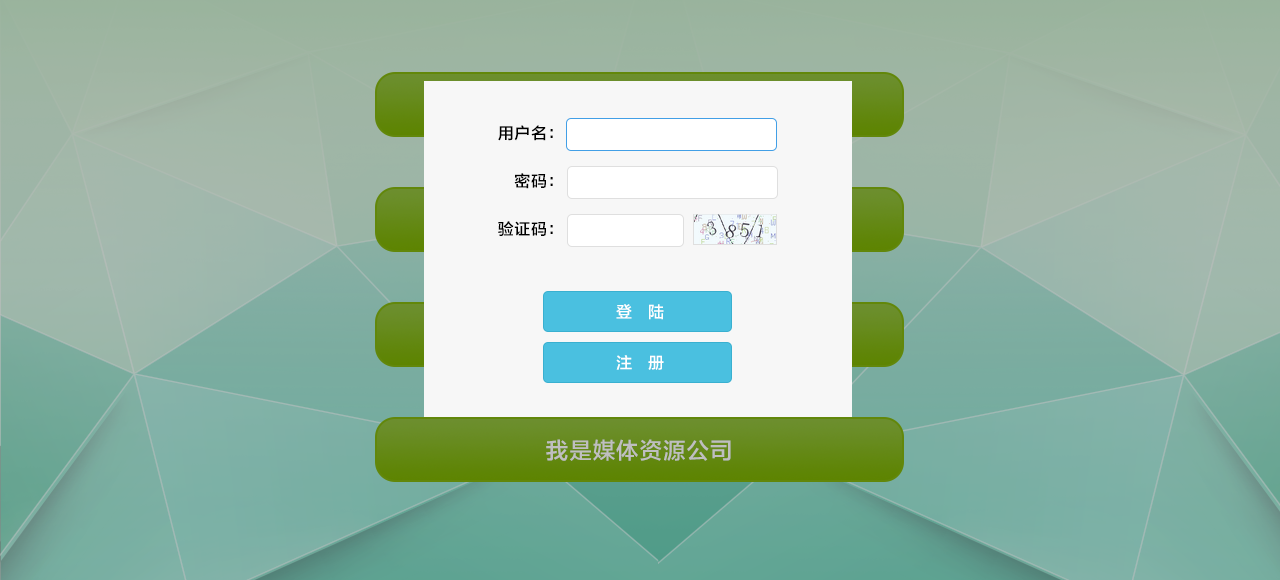
<style>
.page{position:relative;width:1280px;height:580px}
.page>*{position:absolute;margin:0}
.t1{font:16px/48px "FZLTZHK--GBK1-0";letter-spacing:0.04em;color:#000000}
.t2{font:16px "FZLTZHK--GBK1-0";letter-spacing:0.04em;color:#ffffff}
</style>
<div class="page">
<p class="t1" style="left:498px;top:125px;width:55px;height:111px;text-align:right">用户名：<br>密码：<br>验证码：</p>
<p class="t2" style="left:616px;top:304px;width:48px;height:16px">登   陆</p>
<p class="t2" style="left:616px;top:355px;width:48px;height:15px">注   册</p>
</div>
